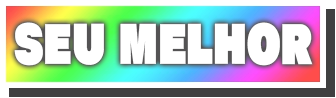
<style>
.page{position:relative;width:336px;height:98px;background:#ffffff}
.page>*{position:absolute;margin:0}
.t1{font:48px "RaglanPunchStd-UB";letter-spacing:0.002em;color:#ffffff;scale:0.8 1}
</style>
<div class="page">
<p class="t1" style="left:14px;top:22px;width:299px;height:44px">SEU MELHOR</p>
</div>
